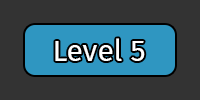
<style>
.page{position:relative;width:200px;height:100px;background:#333333}
.page>*{position:absolute;margin:0}
.t1{font:30px "FiraSans-Regular";color:#ffffff}
</style>
<div class="page">
<p class="t1" style="left:55px;top:38px;width:90px;height:23px">Level 5</p>
</div>
